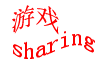
<style>
.page{position:relative;width:100px;height:60px;background:#ffffff}
.page>*{position:absolute;margin:0}
.t1{font:24px "SimSun";color:#fd0000}
.t2{font:24px "SimSun";color:#fc0000}
</style>
<div class="page">
<p class="t1" style="left:12px;top:5px;width:47px;height:30px">游戏</p>
<p class="t2" style="left:13px;top:31px;width:82px;height:28px">sharing</p>
</div>
